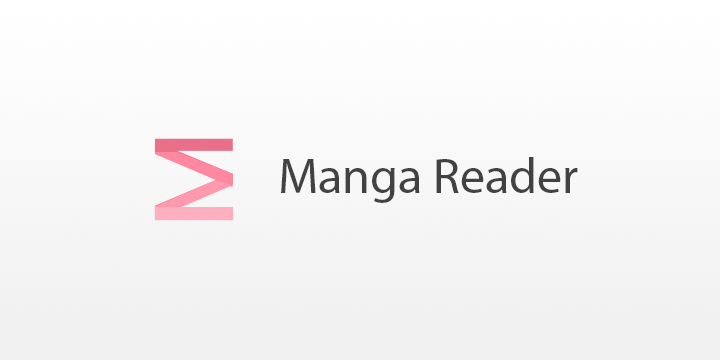
<style>
.page{position:relative;width:720px;height:360px}
.page>*{position:absolute;margin:0}
.t1{font:99px "BanglaSangamMN-Bold";scale:1.13 1}
.t2{font:50px "MyriadPro-Regular";color:#424242}
</style>
<div class="page">
<p class="t1" style="left:154px;top:138px;width:79px;height:83px;rotate:-90deg">M</p>
<p class="t2" style="left:281px;top:157px;width:297px;height:46px">Manga Reader</p>
</div>
